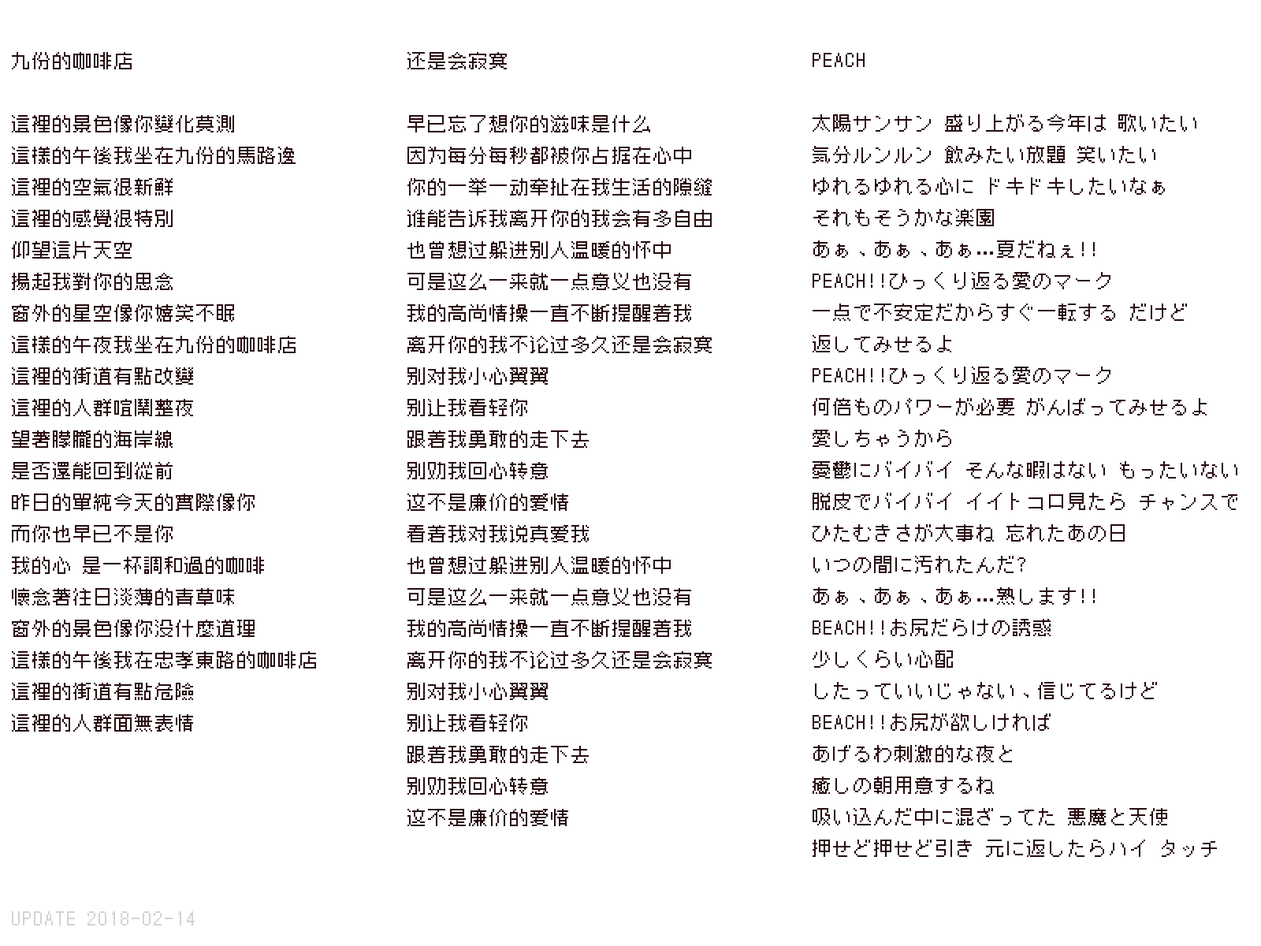
<style>
.page{position:relative;width:1261px;height:946px;background:#ffffff}
.page>*{position:absolute;margin:0}
.t1{font:18.9px/31.5px "Zpix";color:#280b0f}
.t2{font:18.9px "Zpix";color:#d3d3d3}
</style>
<div class="page">
<p class="t1" style="left:12px;top:52px;width:304px;height:679px">九份的咖啡店<br><br>這裡的景色像你變化莫測<br>這樣的午後我坐在九份的馬路邊<br>這裡的空氣很新鮮<br>這裡的感覺很特別<br>仰望這片天空<br>揚起我對你的思念<br>窗外的星空像你嬉笑不眠<br>這樣的午夜我坐在九份的咖啡店<br>這裡的街道有點改變<br>這裡的人群喧鬧整夜<br>望著朦朧的海岸線<br>是否還能回到從前<br>昨日的單純今天的實際像你<br>而你也早已不是你<br>我的心 是一杯調和過的咖啡<br>懷念著往日淡薄的青草味<br>窗外的景色像你沒什麼道理<br>這樣的午後我在忠孝東路的咖啡店<br>這裡的街道有點危險<br>這裡的人群面無表情<br>想問你也問問自己<br>是否還會記得從前<br>昨日的單純今天的實際像你<br>而你也早已不是你</p>
<p class="t1" style="left:407px;top:52px;width:305px;height:774px">还是会寂寞<br><br>早已忘了想你的滋味是什么<br>因为每分每秒都被你占据在心中<br>你的一举一动牵扯在我生活的隙缝<br>谁能告诉我离开你的我会有多自由<br>也曾想过躲进别人温暖的怀中<br>可是这么一来就一点意义也没有<br>我的高尚情操一直不断提醒着我<br>离开你的我不论过多久还是会寂寞<br>别对我小心翼翼<br>别让我看轻你<br>跟着我勇敢的走下去<br>别劝我回心转意<br>这不是廉价的爱情<br>看着我对我说真爱我<br>也曾想过躲进别人温暖的怀中<br>可是这么一来就一点意义也没有<br>我的高尚情操一直不断提醒着我<br>离开你的我不论过多久还是会寂寞<br>别对我小心翼翼<br>别让我看轻你<br>跟着我勇敢的走下去<br>别劝我回心转意<br>这不是廉价的爱情<br>看着我对我说真爱我</p>
<p class="t1" style="left:813px;top:53px;width:424px;height:804px">PEACH<br><br>太陽サンサン 盛り上がる今年は 歌いたい<br>気分ルンルン 飲みたい放題 笑いたい<br>ゆれるゆれる心に ドキドキしたいなぁ<br>それもそうかな楽園<br>あぁ、あぁ、あぁ…夏だねぇ!!<br>PEACH!!ひっくり返る愛のマーク<br>一点で不安定だからすぐ一転する だけど<br>返してみせるよ<br>PEACH!!ひっくり返る愛のマーク<br>何倍ものパワーが必要 がんばってみせるよ<br>愛しちゃうから<br>憂鬱にバイバイ そんな暇はない もったいない<br>脱皮でバイバイ イイトコロ見たら チャンスで<br>ひたむきさが大事ね 忘れたあの日<br>いつの間に汚れたんだ?<br>あぁ、あぁ、あぁ…熟します!!<br>BEACH!!お尻だらけの誘惑<br>少しくらい心配<br>したっていいじゃない、信じてるけど<br>BEACH!!お尻が欲しければ<br>あげるわ刺激的な夜と<br>癒しの朝用意するね<br>吸い込んだ中に混ざってた 悪魔と天使<br>押せど押せど引き 元に返したらハイ タッチ</p>
<p class="t2" style="left:12px;top:911px;width:183px;height:14px">UPDATE 2018-02-14</p>
</div>
